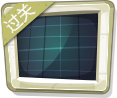
<style>
.page{position:relative;width:117px;height:98px}
.page>*{position:absolute;margin:0}
.t1{font:16px "MicrosoftYaHei";color:#f8f7f2}
</style>
<div class="page">
<p class="t1" style="left:3px;top:4px;width:33px;height:30px;rotate:-43deg">过关</p>
</div>
